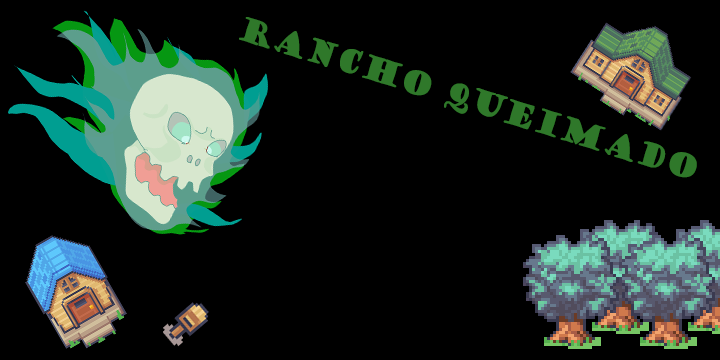
<style>
.page{position:relative;width:720px;height:360px;background:#000000}
.page>*{position:absolute;margin:0}
.t1{font:32.1px "GoudyStout";color:#2f782a;font-weight:bold;scale:0.82 1}
</style>
<div class="page">
<p class="t1" style="left:239px;top:17px;width:458px;height:161px;rotate:17deg">Rancho Queimado</p>
</div>
